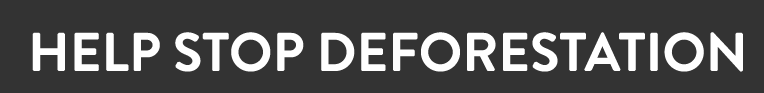
<style>
.page{position:relative;width:764px;height:93px;background:#333333}
.page>*{position:absolute;margin:0}
.t1{font:54.2px "BrandonGrotesque-Bold";color:#ffffff;text-transform:uppercase}
.t2{font:30px "BrandonGrotesque-Light";color:#ffffff;text-transform:uppercase}
</style>
<div class="page">
<p class="t1" style="left:32px;top:32px;width:711px;height:40px"><span class="t2"><br></span>help sTOP DEFORESTATION</p>
</div>
